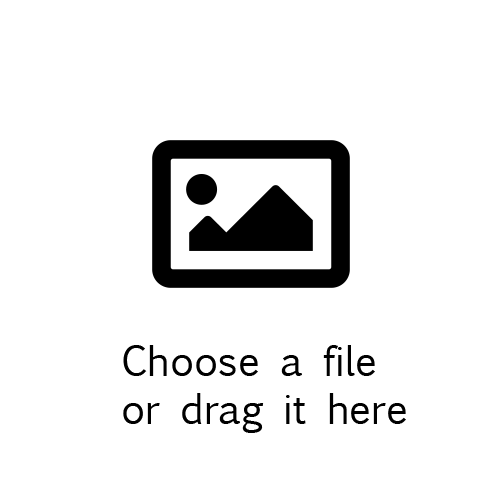
<style>
.page{position:relative;width:500px;height:500px;background:#ffffff}
.page>*{position:absolute;margin:0}
.t1{font:40px "EuphemiaUCAS";color:#000000}
</style>
<div class="page">
<p class="t1" style="left:123px;top:345px;width:283px;height:88px">Choose a file <br>or drag it here</p>
</div>
